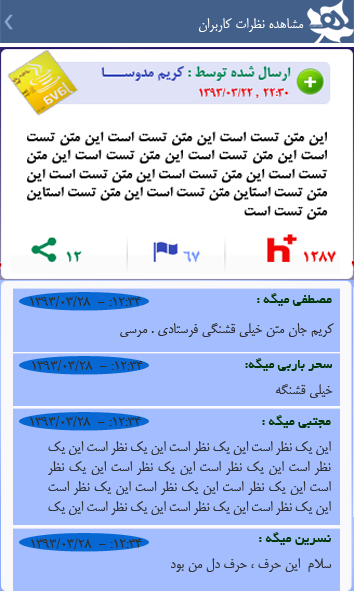
<style>
.page{position:relative;width:354px;height:591px;background:#a3bdfe}
.page>*{position:absolute;margin:0}
.t1{font:16.7px "BMitra";color:#ffffff}
.t2{font:14.6px "BYekan";color:#023908}
.t3{font:16.7px "BMitra";color:#2f2e30}
.t4{font:16.7px "BMitra";color:#2c2b2b}
</style>
<div class="page">
<p class="t1" style="left:198px;top:18px;width:106px;height:14px">مشاهده نظرات کاربران</p>
<p class="t2" style="left:257px;top:293px;width:75px;height:13px">مصطفي ميگه :</p>
<p class="t3" style="left:30px;top:296px;width:111px;height:11px">1393/03/28  - :12:34</p>
<p class="t4" style="left:120px;top:323px;width:214px;height:14px">کريم جان متن خيلي قشنگي فرستادي . مرسي</p>
<p class="t3" style="left:32px;top:360px;width:111px;height:11px">1393/03/28  - :12:34</p>
<p class="t2" style="left:245px;top:358px;width:87px;height:13px">سحر باربي ميگه:</p>
<p class="t3" style="left:275px;top:384px;width:58px;height:14px">خيلي قشنگه</p>
<p class="t3" style="left:30px;top:416px;width:111px;height:11px">1393/03/28  - :12:34</p>
<p class="t2" style="left:262px;top:415px;width:69px;height:13px">مجتبي ميگه :</p>
<p class="t3" style="left:48px;top:441px;width:283px;height:74px;text-align:justify">اين يک نظر است اين يک نظر است اين يک نظر است اين يک نظر است اين يک نظر است اين يک نظر است اين يک نظر است اين يک نظر است اين يک نظر است اين يک نظر است اين يک نظر است اين يک نظر است اين يک نظر است اين يک نظر است</p>
<p class="t2" style="left:259px;top:532px;width:72px;height:13px">نسرين ميگه :</p>
<p class="t3" style="left:31px;top:538px;width:111px;height:11px">1393/03/28  - :12:34</p>
<p class="t3" style="left:171px;top:558px;width:161px;height:14px">سلام  اين حرف ، حرف دل من بود</p>
</div>
